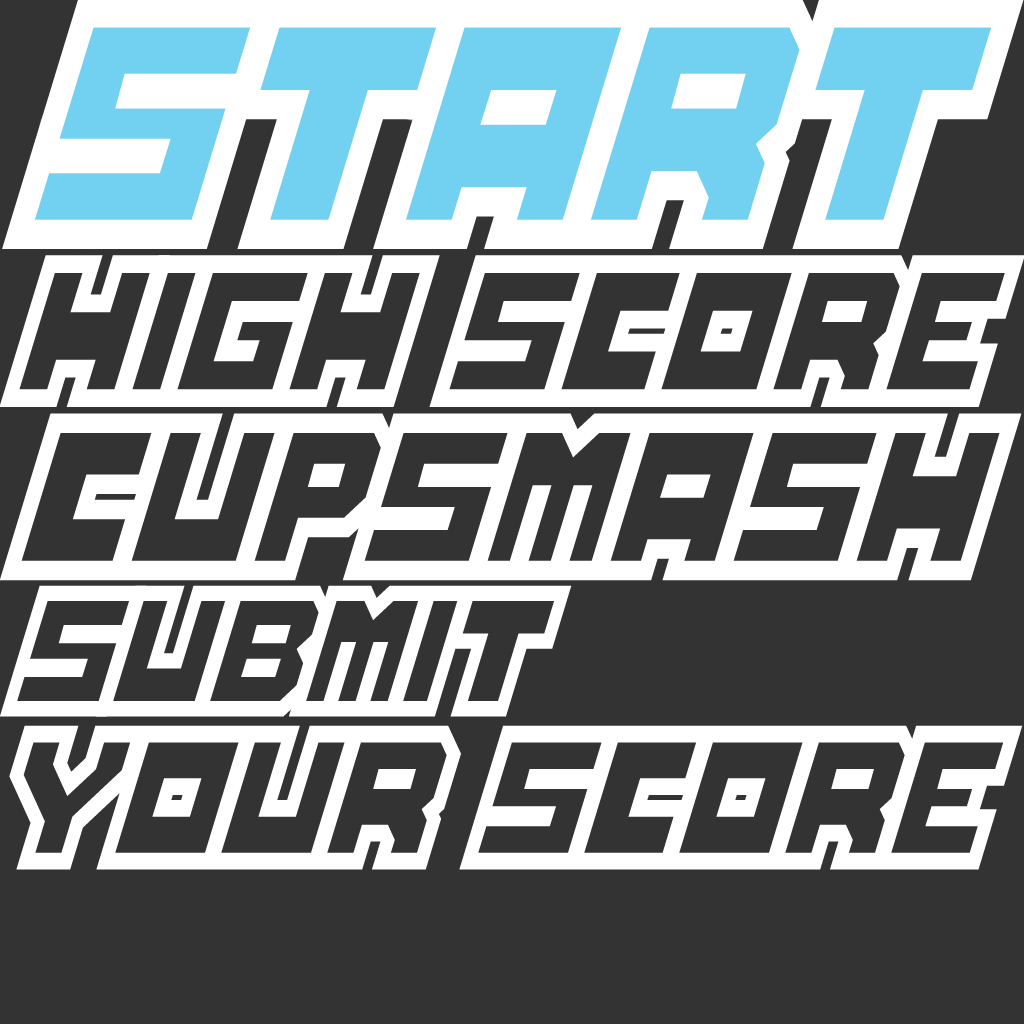
<style>
.page{position:relative;width:1024px;height:1024px;background:#333333}
.page>*{position:absolute;margin:0}
.t1{font:259.6px "FullPack2025";letter-spacing:-0.04em;color:#ffffff;scale:0.76 1}
.t2{font:157.4px "FullPack2025";letter-spacing:-0.04em;color:#ffffff;scale:0.76 1}
.t3{font:172.5px "FullPack2025";letter-spacing:-0.04em;color:#ffffff;scale:0.76 1}
.t4{font:135.3px "FullPack2025";letter-spacing:-0.04em;color:#ffffff;scale:0.76 1}
.t5{font:148.7px "FullPack2025";letter-spacing:-0.04em;color:#ffffff;scale:0.76 1}
</style>
<div class="page">
<p class="t1" style="left:2px;top:0px;width:1022px;height:249px">START</p>
<p class="t2" style="left:0px;top:255px;width:1025px;height:152px">HIGH SCORE</p>
<p class="t3" style="left:0px;top:413px;width:1022px;height:168px">CUPSMASH</p>
<p class="t4" style="left:0px;top:585px;width:572px;height:132px">SUBMIT</p>
<p class="t5" style="left:9px;top:725px;width:1014px;height:145px">YOUR SCORE</p>
</div>
